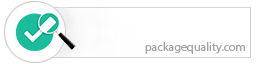
<style>
.page{position:relative;width:256px;height:64px;background:#ffffff}
.page>*{position:absolute;margin:0}
.t1{font:12px "MyriadPro-Regular";color:#a3a3a3}
</style>
<div class="page">
<p class="t1" style="left:145px;top:42px;width:100px;height:12px">packagequality.com</p>
</div>
